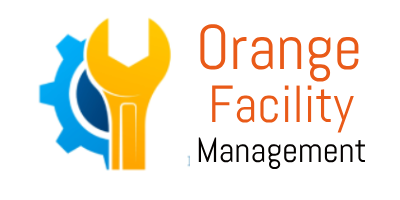
<style>
.page{position:relative;width:400px;height:200px;background:#ffffff}
.page>*{position:absolute;margin:0}
.t1{font:63px "Abel-Regular";color:#e95a18}
.t2{font:52px "Abel-Regular";color:#e95a18}
.t3{font:35px "Abel-Regular";color:#050201}
</style>
<div class="page">
<p class="t1" style="left:200px;top:24px;width:159px;height:58px">Orange</p>
<p class="t2" style="left:212px;top:85px;width:142px;height:48px">Facility</p>
<p class="t3" style="left:198px;top:137px;width:167px;height:33px">Management</p>
</div>
